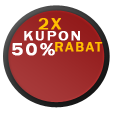
<style>
.page{position:relative;width:115px;height:115px;background:#ffffff}
.page>*{position:absolute;margin:0}
.t1{font:16.2px "FranklinGothic-Medium";letter-spacing:0.1em;color:#ffc000;text-transform:uppercase;font-weight:bold;scale:1.11 1}
.t2{font:14.4px "FranklinGothic-Medium";letter-spacing:0.1em;color:#ffffff;text-transform:uppercase;font-weight:bold;scale:1.11 1}
.t3{font:18px "FranklinGothic-Medium";letter-spacing:0.1em;color:#ffffff;text-transform:uppercase;font-weight:bold;scale:1.11 1}
.t4{font:12.6px "FranklinGothic-Medium";letter-spacing:0.1em;color:#ffc000;text-transform:uppercase;font-weight:bold;scale:1.11 1}
</style>
<div class="page">
<p class="t1" style="left:38px;top:18px;width:24px;height:12px">2x</p>
<p class="t2" style="left:24px;top:31px;width:56px;height:10px">Kupon</p>
<p class="t3" style="left:12px;top:43px;width:43px;height:13px">50%</p>
<p class="t4" style="left:55px;top:42px;width:48px;height:10px">rabat</p>
</div>
